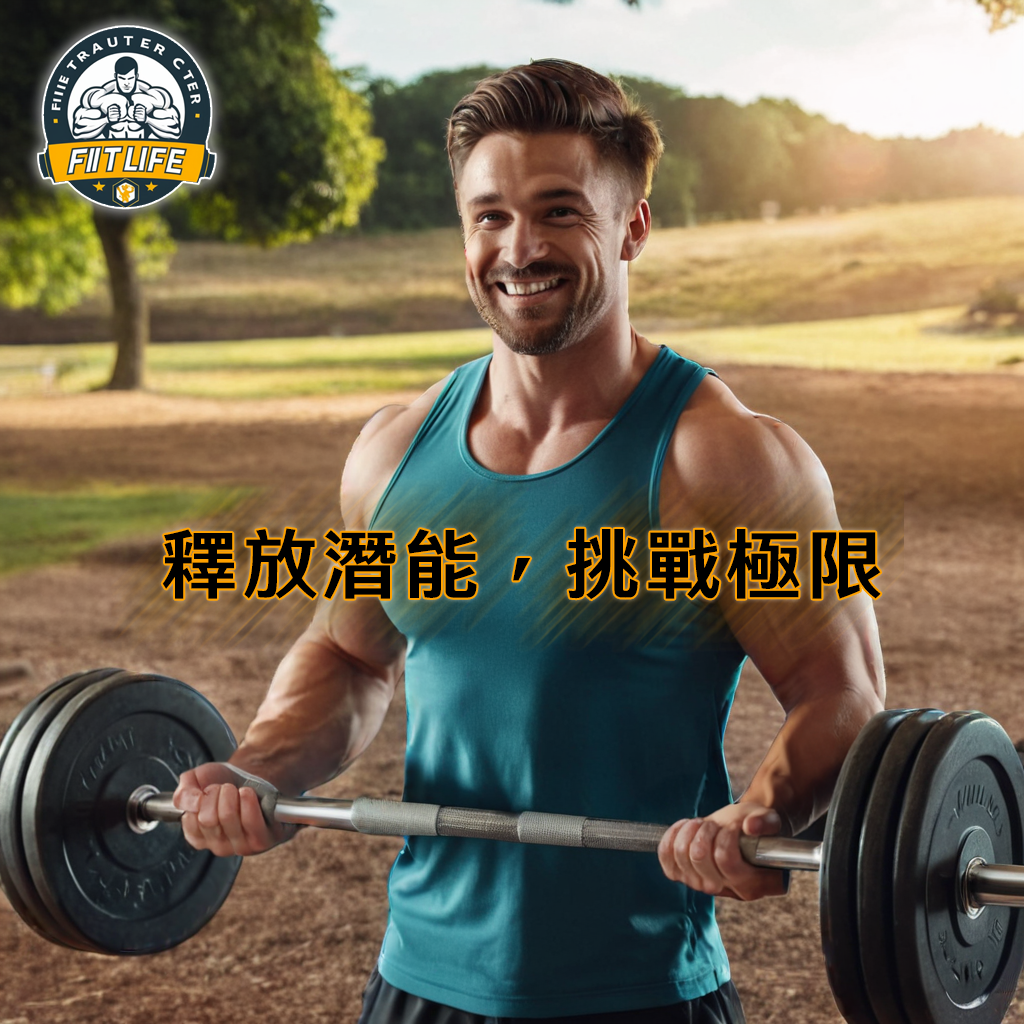
<style>
.page{position:relative;width:1024px;height:1024px}
.page>*{position:absolute;margin:0}
.t1{font:75px "ARFangXinShuH7B5Std-HV";letter-spacing:0.075em;color:#000000}
</style>
<div class="page">
<p class="t1" style="left:162px;top:528px;width:719px;height:72px">釋放潛能，挑戰極限</p>
</div>
